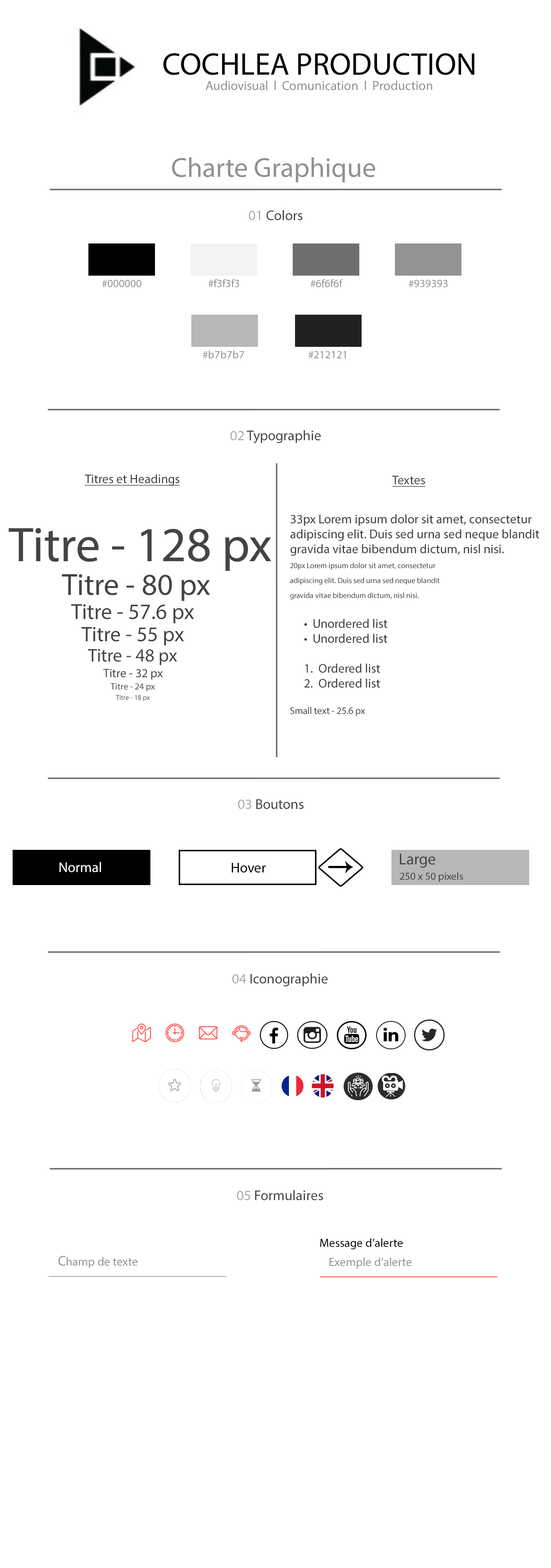
<style>
.page{position:relative;width:551px;height:1568px;background:#ffffff}
.page>*{position:absolute;margin:0}
.t1{font:31.4px "MyriadPro-Regular";color:#000000}
.t2{font:13px "MyriadPro-Regular";color:#909090}
.t3{font:27.6px "MyriadPro-Regular";color:#909090}
.t4{font:14.2px "MyriadPro-Regular";color:#444444}
.t5{font:14.2px "MyriadPro-Regular";color:#aaaaaa}
.t6{font:11.1px "MyriadPro-Regular";color:#909090}
.t7{font:12.6px "MyriadPro-Regular";color:#444444;text-decoration:underline}
.t8{font:12.6px/14.9px "MyriadPro-Regular";color:#3d3d3f}
.t9{font:7.7px/14.9px "MyriadPro-Regular";color:#3d3d3f}
.t10{font:9.8px/11.5px "MyriadPro-Regular";color:#444444}
.t11{font:49px "MyriadPro-Regular";color:#444444}
.t12{font:30.6px "MyriadPro-Regular";color:#444444}
.t13{font:22.1px "MyriadPro-Regular";color:#444444}
.t14{font:21.1px "MyriadPro-Regular";color:#444444}
.t15{font:18.4px "MyriadPro-Regular";color:#444444}
.t16{font:12.2px "MyriadPro-Regular";color:#444444}
.t17{font:9.2px "MyriadPro-Regular";color:#444444}
.t18{font:6.9px "MyriadPro-Regular";color:#444444}
.t19{font:15.9px "MyriadPro-Regular";color:#444444}
.t20{font:14.2px "MyriadPro-Regular";color:#ffffff}
.t21{font:14.2px "MyriadPro-Regular";color:#000000}
.t22{font:10.6px "MyriadPro-Regular";color:#444444}
.t23{font:11.9px "MyriadPro-Regular";color:#000000}
.t24{font:11.9px "MyriadPro-Regular";color:#929292}
.t25{font:14.2px "MyriadPro-Regular";color:#929292}
</style>
<div class="page">
<p class="t1" style="left:163px;top:53px;width:312px;height:22px">COCHLEA PRODUCTION</p>
<p class="t2" style="left:206px;top:80px;width:227px;height:10px">Audiovisual  l  Comunication  l  Production</p>
<p class="t3" style="left:172px;top:157px;width:204px;height:26px">Charte Graphique</p>
<p class="t4" style="left:249px;top:210px;width:54px;height:10px"><span class="t5">01</span> Colors</p>
<p class="t6" style="left:102px;top:280px;width:40px;height:7px">#000000</p>
<p class="t6" style="left:209px;top:279px;width:30px;height:8px">#f3f3f3</p>
<p class="t6" style="left:311px;top:279px;width:32px;height:8px">#6f6f6f</p>
<p class="t6" style="left:409px;top:280px;width:39px;height:7px">#939393</p>
<p class="t6" style="left:203px;top:350px;width:41px;height:9px">#b7b7b7</p>
<p class="t6" style="left:309px;top:351px;width:37px;height:7px">#212121</p>
<p class="t4" style="left:230px;top:430px;width:91px;height:13px"><span class="t5">02</span> Typographie</p>
<p class="t7" style="left:85px;top:474px;width:95px;height:12px">Titres et Headings</p>
<p class="t7" style="left:392px;top:475px;width:34px;height:12px">Textes</p>
<p class="t8" style="left:290px;top:514px;width:249px;height:202px">33px Lorem ipsum dolor sit amet, consectetur <br>adipiscing elit. Duis sed urna sed neque blandit <br>gravida vitae bibendum dictum, nisl nisi. <br><span class="t9">20px Lorem ipsum dolor sit amet, consectetur <br>adipiscing elit. Duis sed urna sed neque blandit <br>gravida vitae bibendum dictum, nisl nisi. <br><br></span> •  Unordered list<br> •  Unordered list<br><br> 1.  Ordered list<br> 2.  Ordered list<br><br><span class="t10">Small text - 25.6 px</span></p>
<p class="t11" style="left:8px;top:528px;width:263px;height:43px">Titre - 128 px</p>
<p class="t12" style="left:62px;top:574px;width:148px;height:27px">Titre - 80 px</p>
<p class="t13" style="left:71px;top:604px;width:123px;height:20px">Titre - 57.6 px</p>
<p class="t14" style="left:82px;top:627px;width:102px;height:18px">Titre - 55 px</p>
<p class="t15" style="left:88px;top:649px;width:89px;height:16px">Titre - 48 px</p>
<p class="t16" style="left:103px;top:669px;width:60px;height:11px">Titre - 32 px</p>
<p class="t17" style="left:111px;top:683px;width:44px;height:8px">Titre - 24 px</p>
<p class="t18" style="left:116px;top:695px;width:34px;height:6px">Titre - 18 px</p>
<p class="t4" style="left:238px;top:799px;width:66px;height:10px"><span class="t5">03</span> Boutons</p>
<p class="t19" style="left:400px;top:854px;width:36px;height:14px">Large</p>
<p class="t20" style="left:59px;top:862px;width:42px;height:10px">Normal</p>
<p class="t21" style="left:232px;top:863px;width:34px;height:10px">Hover</p>
<p class="t22" style="left:400px;top:872px;width:63px;height:10px">250 x 50 pixels</p>
<p class="t4" style="left:232px;top:973px;width:96px;height:14px"><span class="t5">04</span> Iconographie</p>
<p class="t4" style="left:237px;top:1190px;width:86px;height:10px"><span class="t5">05</span> Formulaires</p>
<p class="t23" style="left:320px;top:1238px;width:83px;height:12px">Message d’alerte</p>
<p class="t24" style="left:48px;top:1256px;width:178px;height:21px"><span class="t25">   C</span>hamp de texte</p>
<p class="t24" style="left:320px;top:1258px;width:178px;height:19px"><span class="t25">  </span> Exemple d’alerte</p>
</div>
